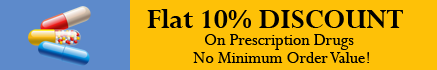
<style>
.page{position:relative;width:437px;height:70px;background:#fec107}
.page>*{position:absolute;margin:0}
.t1{font:30.1px "Perpetua-Bold";color:#000000}
.t2{font:18.1px "Perpetua";color:#000000}
</style>
<div class="page">
<p class="t1" style="left:147px;top:9px;width:256px;height:19px">Flat 10% DISCOUNT</p>
<p class="t2" style="left:205px;top:34px;width:149px;height:16px">On Prescription Drugs</p>
<p class="t2" style="left:193px;top:52px;width:176px;height:11px">No Minimum Order Value!</p>
</div>
